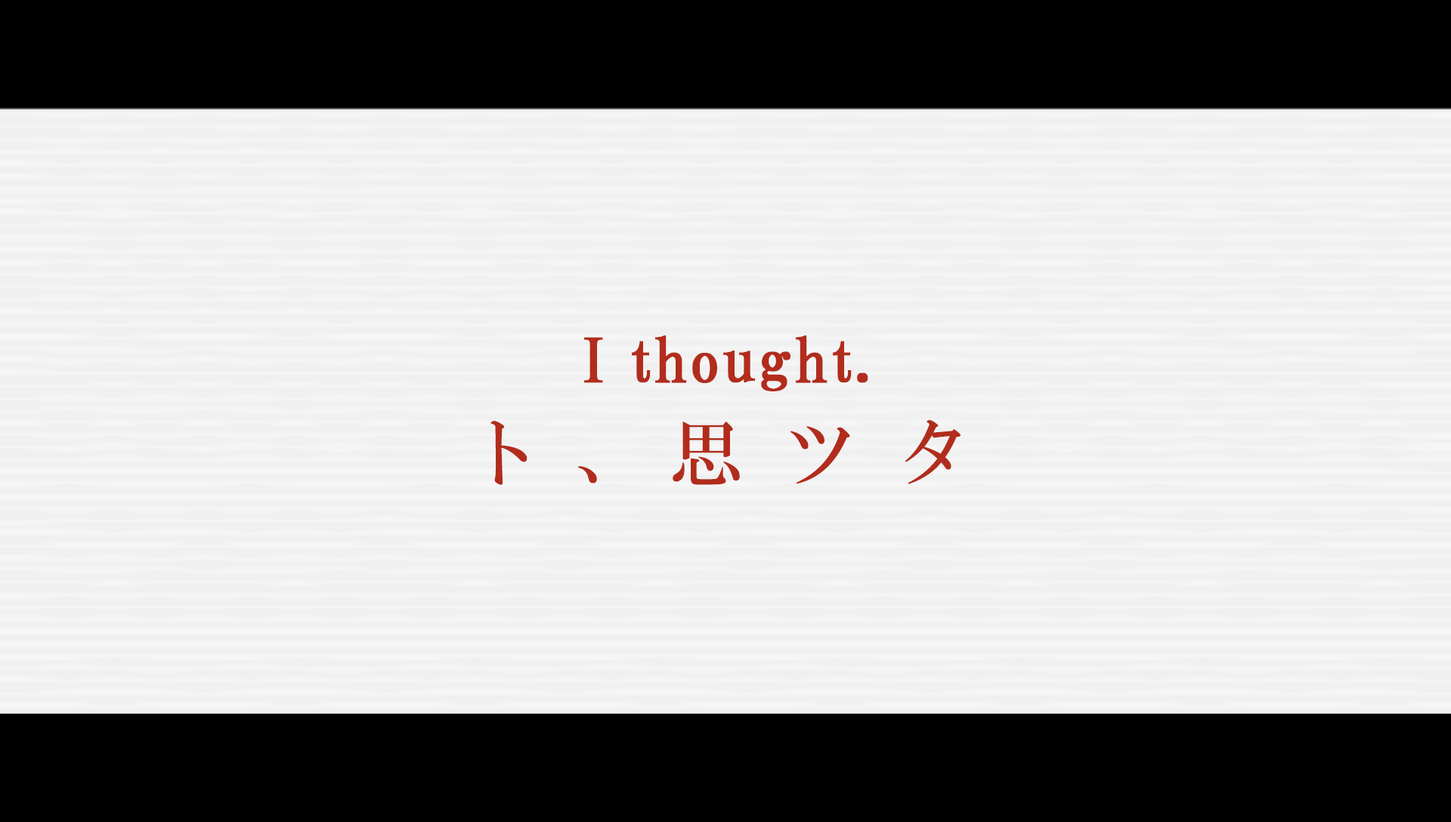
<style>
.page{position:relative;width:1451px;height:822px;background:#f0f0f0}
.page>*{position:absolute;margin:0}
.t1{font:60.4px "HGPMinchoB";letter-spacing:0.025em;color:#b22c1c;font-weight:bold}
.t2{font:72.5px "HGMinchoB";letter-spacing:0.57em;color:#b22c1c}
.t3{font:72.5px "HGMinchoB";letter-spacing:0.49em;color:#b22c1c}
.t4{font:72.5px "HGMinchoB";letter-spacing:0.31em;color:#b22c1c}
</style>
<div class="page">
<p class="t1" style="left:584px;top:335px;width:284px;height:56px">I thought.</p>
<p class="t2" style="left:490px;top:420px;width:470px;height:65px"><span class="t3">ト</span><span class="t4">、</span>思ツタ</p>
</div>
